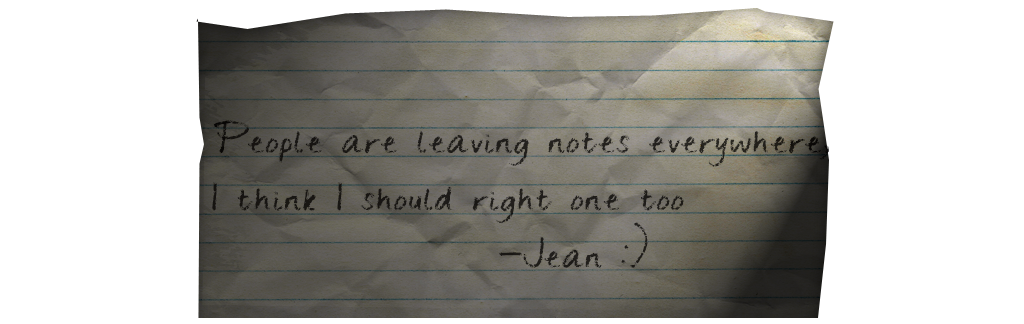
<style>
.page{position:relative;width:1024px;height:324px;background:#ffffff}
.page>*{position:absolute;margin:0}
.t1{font:36px/57.3px "ChangeTomorrowToday";color:#1e1c18;font-style:italic}
</style>
<div class="page">
<p class="t1" style="left:212px;top:120px;width:617px;height:148px">People are leaving notes everywhere, <br>I think I should right one too<br>        -Jean :)</p>
</div>
